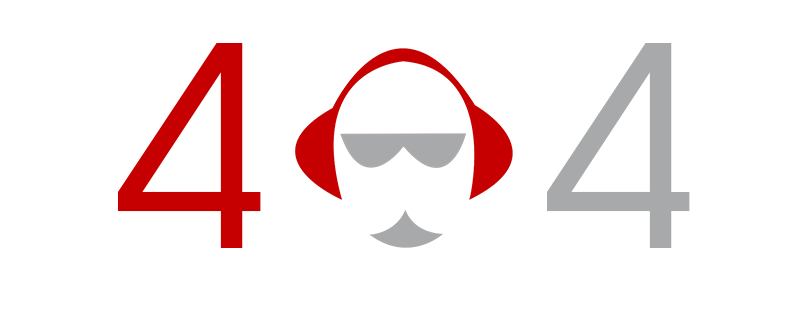
<style>
.page{position:relative;width:800px;height:320px;background:#ffffff}
.page>*{position:absolute;margin:0}
.t1{font:266.7px "AbeatbyKai";color:#c60000}
.t2{font:266.7px "AbeatbyKai";color:#a8a9aa}
</style>
<div class="page">
<p class="t1" style="left:118px;top:43px;width:572px;height:205px">4  <span class="t2">4</span></p>
</div>
